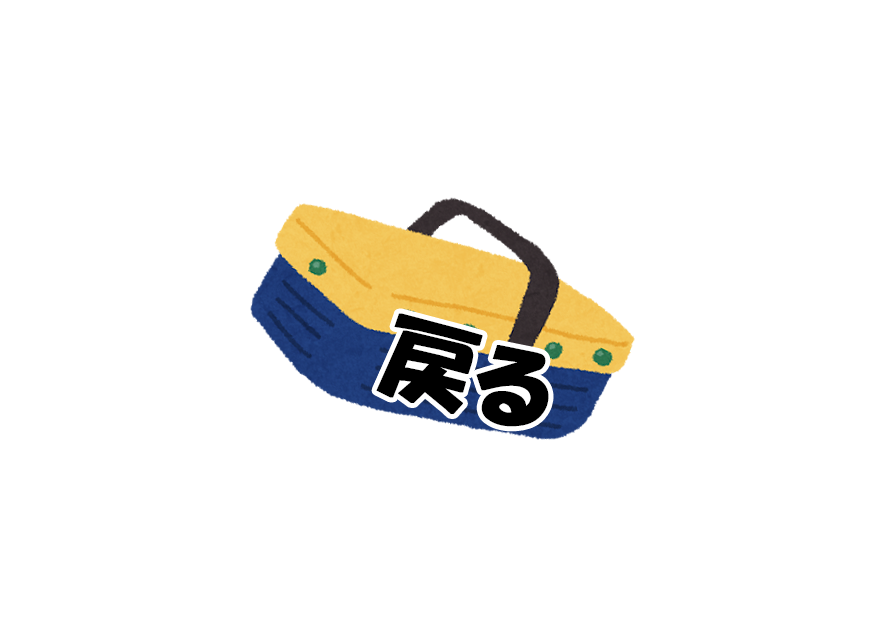
<style>
.page{position:relative;width:880px;height:640px;background:#ffffff}
.page>*{position:absolute;margin:0}
.t1{font:89.8px "HGPSoeiKakupoptai";color:#000000;font-weight:bold}
</style>
<div class="page">
<p class="t1" style="left:376px;top:313px;width:173px;height:114px;rotate:16deg">戻る</p>
</div>
